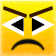
<style>
.page{position:relative;width:56px;height:56px}
.page>*{position:absolute;margin:0}
.t1{font:30px "TimesNewRomanPSMT";font-weight:bold}
.t2{font:17px "TimesNewRomanPSMT";letter-spacing:0.2em;color:#000000;font-weight:bold}
.t3{font:35px "TimesNewRomanPSMT";color:#0f0f0f;font-weight:bold}
</style>
<div class="page">
<p class="t1" style="left:1px;top:14px;width:54px;height:22px">◄►</p>
<p class="t2" style="left:11px;top:18px;width:34px;height:14px">◄►</p>
<p class="t3" style="left:11px;top:39px;width:33px;height:11px;rotate:90deg">(</p>
</div>
